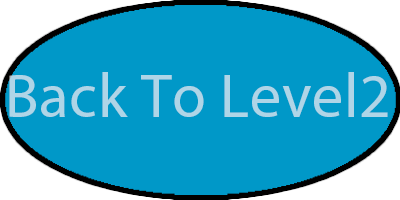
<style>
.page{position:relative;width:400px;height:200px;background:#0098c8}
.page>*{position:absolute;margin:0}
.t1{font:61.7px "MyriadPro-Regular";letter-spacing:0.01em;color:#afd5e7}
</style>
<div class="page">
<p class="t1" style="left:9px;top:72px;width:379px;height:45px">Back To Level2</p>
</div>
